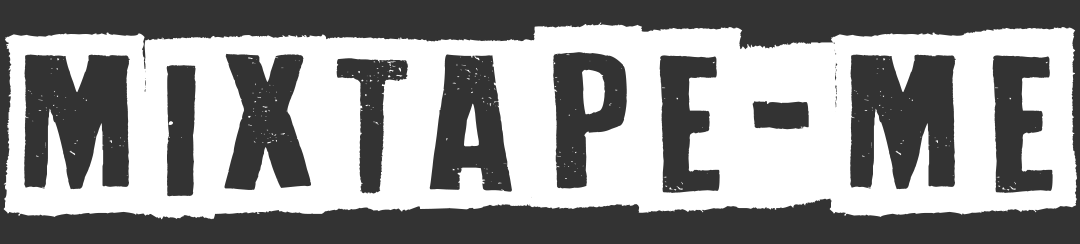
<style>
.page{position:relative;width:1080px;height:244px;background:#333333}
.page>*{position:absolute;margin:0}
.t1{font:173.8px "WhiteOnBlack";color:#ffffff}
</style>
<div class="page">
<p class="t1" style="left:3px;top:22px;width:1074px;height:198px">Mixtape-me</p>
</div>
